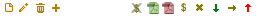
<style>
.page{position:relative;width:256px;height:16px;background:#ffffff}
.page>*{position:absolute;margin:0}
.t1{font:10px "ArialMT";color:#827b00}
</style>
<div class="page">
<p class="t1" style="left:181px;top:3px;width:6px;height:9px">$</p>
</div>
